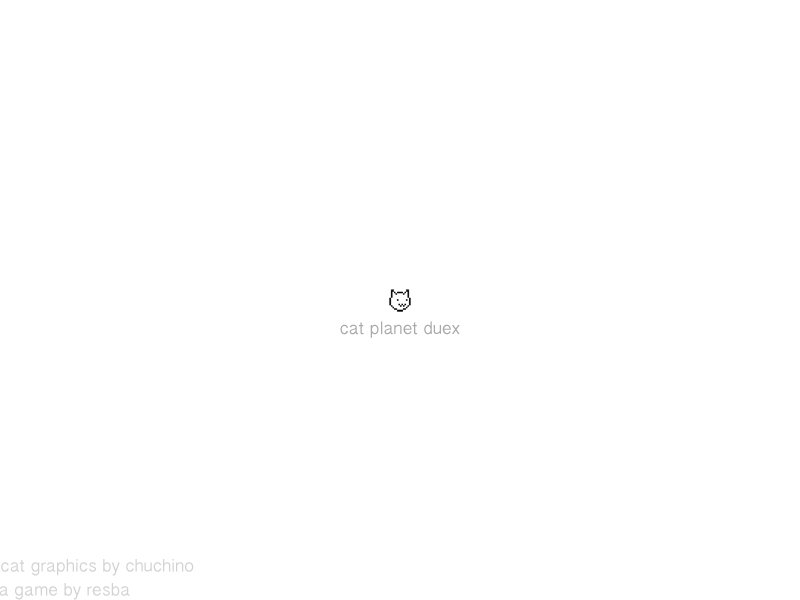
<style>
.page{position:relative;width:800px;height:600px;background:#ffffff}
.page>*{position:absolute;margin:0}
.t1{font:18px "GujaratiSangamMN";color:#a9a9a9}
.t2{font:18px "GujaratiSangamMN";color:#d2d2d2}
</style>
<div class="page">
<p class="t1" style="left:340px;top:321px;width:120px;height:17px">cat planet duex</p>
<p class="t2" style="left:1px;top:559px;width:193px;height:17px">cat graphics by chuchino</p>
<p class="t2" style="left:0px;top:583px;width:130px;height:17px">a game by resba</p>
</div>
